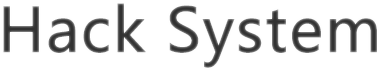
<style>
.page{position:relative;width:380px;height:71px;background:#ffffff}
.page>*{position:absolute;margin:0}
.t1{font:60px "MicrosoftYaHei";color:#434343;font-weight:bold}
</style>
<div class="page">
<p class="t1" style="left:3px;top:3px;width:374px;height:65px">Hack System</p>
</div>
